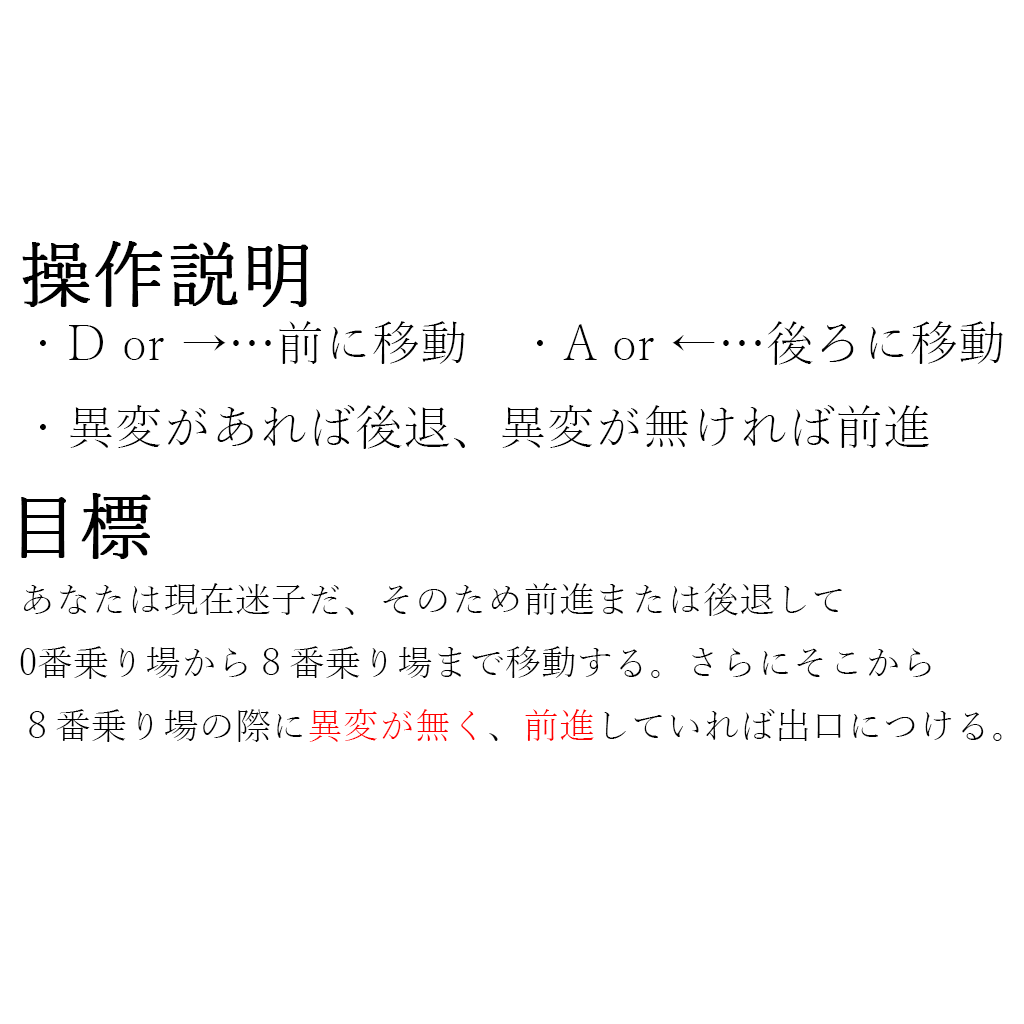
<style>
.page{position:relative;width:1024px;height:1024px;background:#ffffff}
.page>*{position:absolute;margin:0}
.t1{font:72px "YuMincho-Light";color:#000000;font-weight:bold}
.t2{font:48px "YuMincho-Light";color:#000000}
.t3{font:36px "YuMincho-Light";color:#000000}
.t4{font:36px "YuMincho-Light";color:#ff0000}
</style>
<div class="page">
<p class="t1" style="left:22px;top:241px;width:286px;height:66px">操作説明</p>
<p class="t2" style="left:40px;top:321px;width:963px;height:128px">・D or →…前に移動　・A or ←…後ろに移動<br>・異変があれば後退、異変が無ければ前進</p>
<p class="t1" style="left:21px;top:493px;width:130px;height:66px">目標</p>
<p class="t3" style="left:20px;top:583px;width:982px;height:159px">あなたは現在迷子だ、そのため前進または後退して<br>0番乗り場から８番乗り場まで移動する。さらにそこから<br>８番乗り場の際に<span class="t4">異変が無く</span>、<span class="t4">前進</span>していれば出口につける。</p>
</div>
